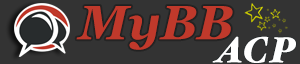
<style>
.page{position:relative;width:300px;height:64px;background:#333333}
.page>*{position:absolute;margin:0}
.t1{font:48px "Georgia-BoldItalic";color:#c0392b}
.t2{font:36px "HoeflerText-BlackItalic";color:#f9fbfd}
</style>
<div class="page">
<p class="t1" style="left:76px;top:6px;width:157px;height:44px">MyBB</p>
<p class="t1" style="left:76px;top:6px;width:157px;height:44px">MyBB</p>
<p class="t2" style="left:212px;top:36px;width:84px;height:27px">ACP</p>
</div>
